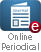
<style>
.page{position:relative;width:41px;height:52px;background:#ffffff}
.page>*{position:absolute;margin:0}
.t1{font:9px/10px "MyriadPro-Regular";letter-spacing:-0.015em;color:#878787}
</style>
<div class="page">
<p class="t1" style="left:2px;top:33px;width:37px;height:17px;text-align:center">Online<br>Periodical</p>
</div>
